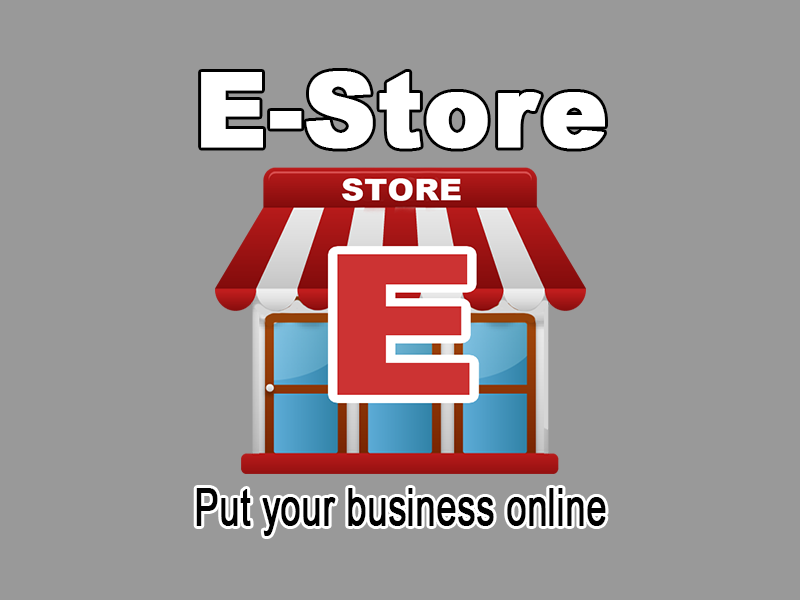
<style>
.page{position:relative;width:800px;height:600px;background:#999999}
.page>*{position:absolute;margin:0}
.t1{font:103px "Arial-Black";color:#ffffff;font-weight:bold;scale:0.96 1}
.t2{font:50.7px "ArialMT";color:#000000;font-weight:bold;scale:0.71 1}
</style>
<div class="page">
<p class="t1" style="left:201px;top:71px;width:404px;height:78px">E-Store</p>
<p class="t2" style="left:196px;top:488px;width:410px;height:48px">Put your business online</p>
</div>
